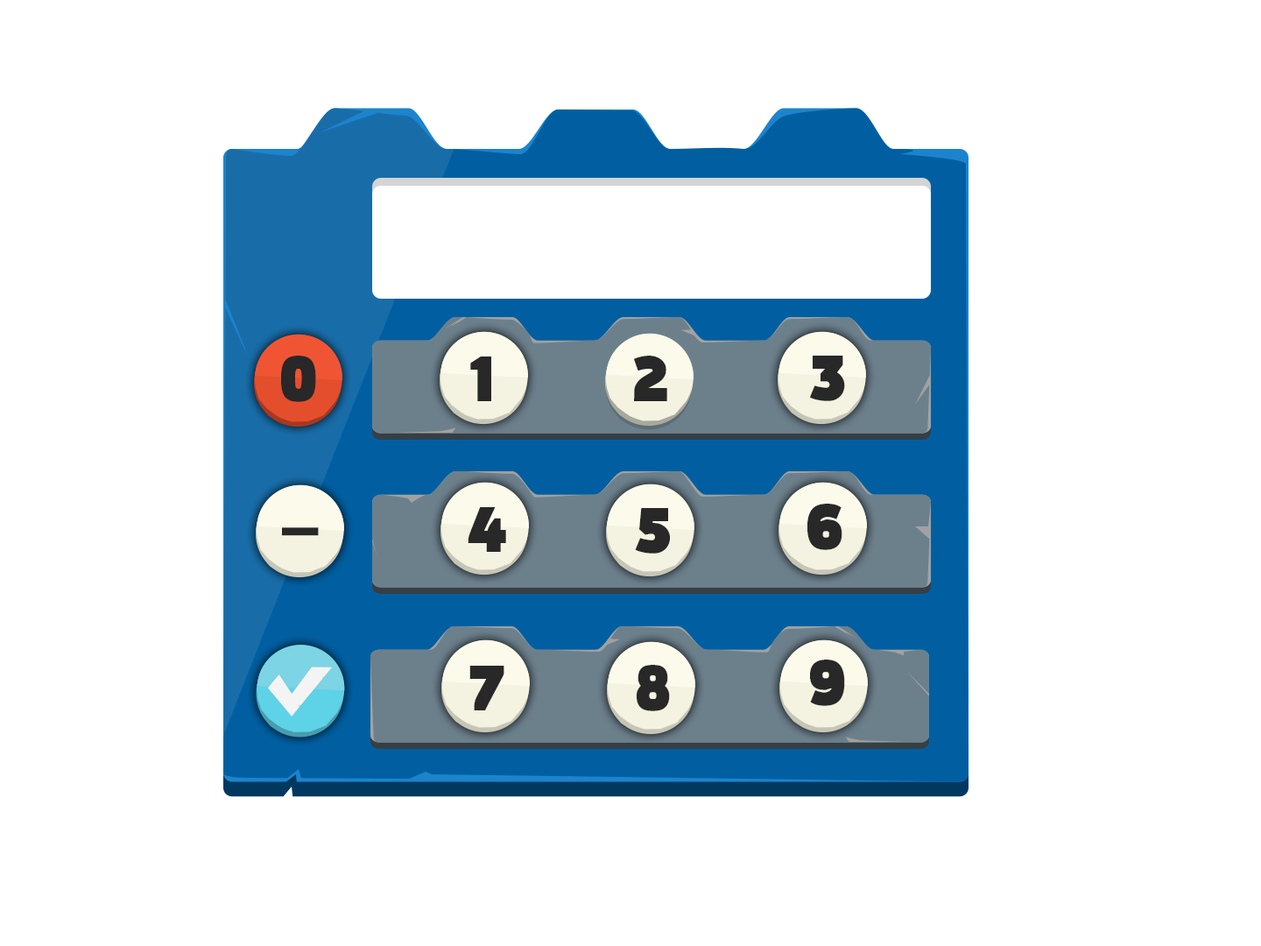
<style>
.page{position:relative;width:1261px;height:946px;background:#ffffff}
.page>*{position:absolute;margin:0}
.t1{font:63px "MovaviGrotesqueBlack";color:#282828}
</style>
<div class="page">
<p class="t1" style="left:281px;top:356px;width:35px;height:46px">0</p>
<p class="t1" style="left:470px;top:356px;width:21px;height:45px">1</p>
<p class="t1" style="left:634px;top:356px;width:33px;height:45px">2a</p>
<p class="t1" style="left:810px;top:356px;width:35px;height:45px">3</p>
<p class="t1" style="left:468px;top:507px;width:38px;height:45px">4</p>
<p class="t1" style="left:635px;top:508px;width:35px;height:45px">5</p>
<p class="t1" style="left:807px;top:503px;width:35px;height:47px">6</p>
<p class="t1" style="left:282px;top:527px;width:37px;height:9px">_</p>
<p class="t1" style="left:469px;top:665px;width:35px;height:45px">7</p>
<p class="t1" style="left:637px;top:665px;width:33px;height:46px">8</p>
<p class="t1" style="left:810px;top:659px;width:35px;height:47px">9</p>
</div>
